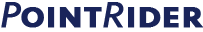
<style>
.page{position:relative;width:203px;height:32px;background:#ffffff}
.page>*{position:absolute;margin:0}
.t1{font:37.5px "Seravek-Medium";color:#19245a;font-variant:small-caps;font-weight:bold}
.t2{font:37.5px "Seravek-Italic";color:#19245a;text-transform:uppercase;font-weight:bold}
</style>
<div class="page">
<p class="t1" style="left:1px;top:2px;width:202px;height:26px"><span class="t2">P</span>oint<span class="t2">R</span>ider</p>
</div>
